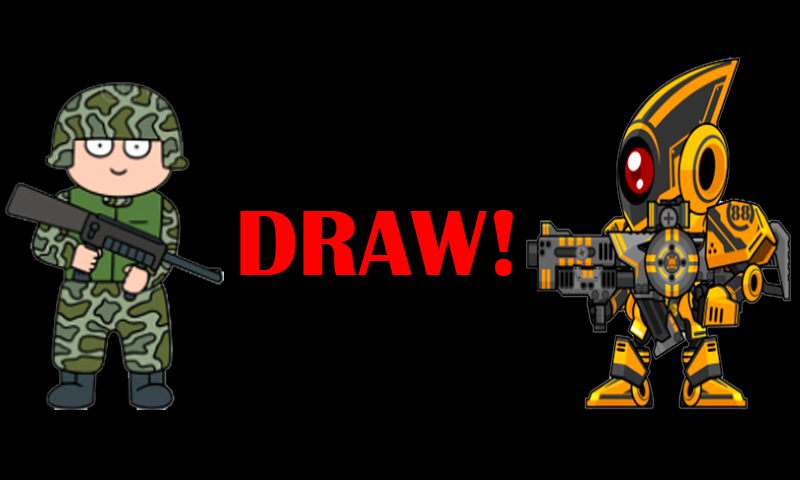
<style>
.page{position:relative;width:800px;height:480px;background:#000000}
.page>*{position:absolute;margin:0}
.t1{font:96px "BritannicBold";color:#ff0000}
</style>
<div class="page">
<p class="t1" style="left:240px;top:210px;width:273px;height:66px">DRAW!</p>
</div>
